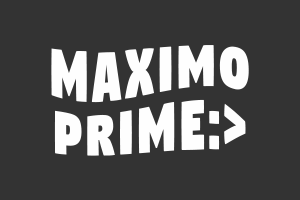
<style>
.page{position:relative;width:300px;height:200px;background:#333333}
.page>*{position:absolute;margin:0}
.t1{font:75.8px/58.3px "Digitalt";letter-spacing:0.05em;color:#fefefe;scale:0.77 1}
</style>
<div class="page">
<p class="t1" style="left:51px;top:45px;width:198px;height:111px;text-align:center">MAXIMO<br>PRIME:&gt;</p>
</div>
